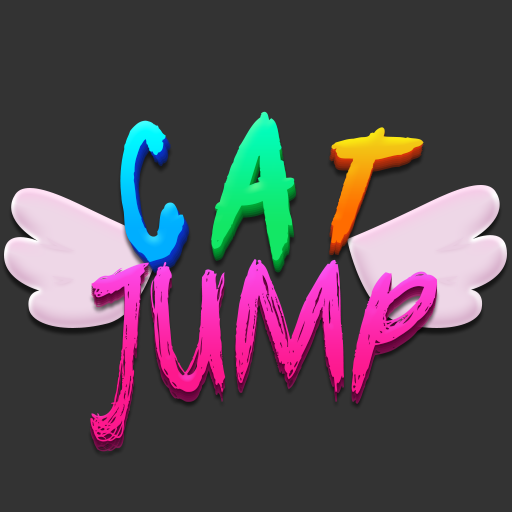
<style>
.page{position:relative;width:512px;height:512px;background:#333333}
.page>*{position:absolute;margin:0}
.t1{font:195px "beermoney";text-transform:uppercase;font-weight:bold;scale:0.85 1}
.t2{font:192.2px "beermoney";text-transform:uppercase;font-weight:bold;scale:0.85 1}
.t3{font:178px "beermoney";text-transform:uppercase;font-weight:bold;scale:0.85 1}
.t4{font:188.2px "beermoney";text-transform:uppercase;scale:0.77 1}
</style>
<div class="page">
<p class="t1" style="left:211px;top:111px;width:84px;height:150px;rotate:-3deg">a</p>
<p class="t2" style="left:120px;top:120px;width:65px;height:143px;rotate:-19deg">C</p>
<p class="t3" style="left:331px;top:127px;width:93px;height:117px;rotate:14deg">T</p>
<p class="t4" style="left:90px;top:259px;width:348px;height:183px">JUMP</p>
</div>
